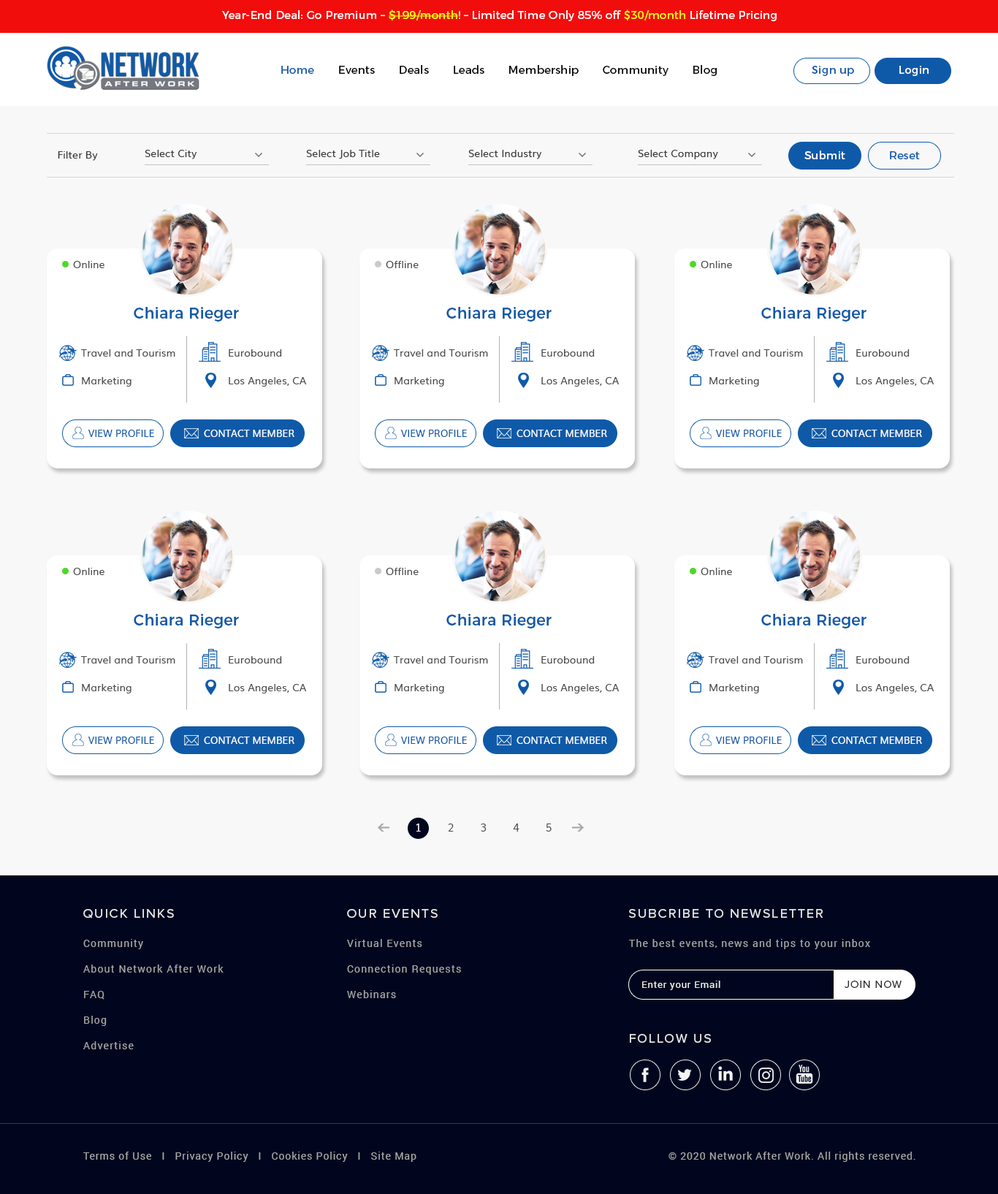
<style>
.page{position:relative;width:998px;height:1194px;background:#ffffff}
.page>*{position:absolute;margin:0}
.t1{font:11px "Montserrat-Regular";letter-spacing:0.01em;color:#fffefe}
.t2{font:11px "Montserrat-Regular";letter-spacing:0.01em;color:#eafd18}
.t3{font:11px "Montserrat-Regular";letter-spacing:0.01em;color:#000000}
.t4{font:11px "Montserrat-Regular";letter-spacing:0.01em;color:#0f5aa8}
.t5{font:11px "Montserrat-Regular";letter-spacing:0.01em;color:#ffffff}
.t6{font:10.2px "Muli";letter-spacing:0.005em;color:#393939}
.t7{font:10.2px "Muli";letter-spacing:0.005em;color:#4e4e4e}
.t8{font:15.3px "Montserrat-Medium";letter-spacing:0.01em;color:#0f5aa8}
.t9{font:10.2px/27.8px "Muli";letter-spacing:0.005em;color:#4e4e4e}
.t10{font:9.5px "Muli";letter-spacing:0.01em;color:#0f5aa8}
.t11{font:9.5px "Muli";letter-spacing:0.01em;color:#ffffff}
.t12{font:11px "Muli";letter-spacing:0.005em;color:#4e4e4e}
.t13{font:11px "Muli";letter-spacing:0.005em;color:#ffffff}
.t14{font:13.2px "ProximaNova-Regular";letter-spacing:0.105em;color:#e7e7e7;text-transform:uppercase}
.t15{font:10.2px/25.6px "Roboto-Regular";letter-spacing:0.085em;color:#a7a7a7}
.t16{font:10.2px "Roboto-Regular";letter-spacing:0.085em;color:#a7a7a7}
.t17{font:9.5px "Roboto-Regular";letter-spacing:0.065em;color:#e7e7e7}
.t18{font:11px "ProximaNova-Regular";letter-spacing:0.065em;color:#262626;text-transform:uppercase}
.t19{font:10.2px "Roboto-Regular";letter-spacing:0.065em;color:#a7a7a7}
</style>
<div class="page">
<p class="t1" style="left:222px;top:10px;width:555px;height:11px">Year-End Deal: Go Premium – <span class="t2">$199/month</span>! – Limited Time Only 85% off <span class="t2">$30/month</span> Lifetime Pricing</p>
<p class="t3" style="left:281px;top:65px;width:436px;height:11px"><span class="t4">Home</span>       Events       Deals       Leads       Membership       Community       Blog</p>
<p class="t4" style="left:812px;top:66px;width:42px;height:10px">Sign up</p>
<p class="t5" style="left:900px;top:66px;width:29px;height:10px">Login</p>
<p class="t6" style="left:145px;top:150px;width:52px;height:9px">Select City</p>
<p class="t6" style="left:306px;top:150px;width:74px;height:9px">Select Job Title</p>
<p class="t6" style="left:469px;top:150px;width:73px;height:9px">Select Industry</p>
<p class="t6" style="left:638px;top:150px;width:80px;height:9px">Select Company</p>
<p class="t6" style="left:58px;top:151px;width:40px;height:10px">Filter By</p>
<p class="t5" style="left:805px;top:151px;width:41px;height:8px">Submit</p>
<p class="t4" style="left:890px;top:151px;width:30px;height:8px">Reset</p>
<p class="t7" style="left:73px;top:261px;width:32px;height:7px">Online</p>
<p class="t7" style="left:386px;top:261px;width:33px;height:7px">Offline</p>
<p class="t7" style="left:701px;top:261px;width:31px;height:7px">Online</p>
<p class="t8" style="left:134px;top:307px;width:105px;height:15px">Chiara Rieger</p>
<p class="t8" style="left:447px;top:307px;width:105px;height:15px">Chiara Rieger</p>
<p class="t8" style="left:762px;top:307px;width:105px;height:15px">Chiara Rieger</p>
<p class="t9" style="left:80px;top:349px;width:95px;height:38px">Travel and Tourism<br>Marketing</p>
<p class="t9" style="left:229px;top:349px;width:78px;height:38px">Eurobound<br>Los Angeles, CA</p>
<p class="t9" style="left:393px;top:349px;width:95px;height:38px">Travel and Tourism<br>Marketing</p>
<p class="t9" style="left:542px;top:349px;width:78px;height:38px">Eurobound<br>Los Angeles, CA</p>
<p class="t9" style="left:708px;top:349px;width:95px;height:38px">Travel and Tourism<br>Marketing</p>
<p class="t9" style="left:857px;top:349px;width:78px;height:38px">Eurobound<br>Los Angeles, CA</p>
<p class="t10" style="left:88px;top:430px;width:66px;height:7px">VIEW PROFILE</p>
<p class="t11" style="left:204px;top:430px;width:91px;height:7px">CONTACT MEMBER</p>
<p class="t10" style="left:401px;top:430px;width:66px;height:7px">VIEW PROFILE</p>
<p class="t11" style="left:517px;top:430px;width:90px;height:7px">CONTACT MEMBER</p>
<p class="t10" style="left:716px;top:430px;width:66px;height:7px">VIEW PROFILE</p>
<p class="t11" style="left:832px;top:430px;width:90px;height:7px">CONTACT MEMBER</p>
<p class="t7" style="left:73px;top:568px;width:32px;height:7px">Online</p>
<p class="t7" style="left:386px;top:568px;width:33px;height:7px">Offline</p>
<p class="t7" style="left:701px;top:568px;width:31px;height:7px">Online</p>
<p class="t8" style="left:134px;top:614px;width:105px;height:15px">Chiara Rieger</p>
<p class="t8" style="left:447px;top:614px;width:105px;height:15px">Chiara Rieger</p>
<p class="t8" style="left:762px;top:614px;width:105px;height:15px">Chiara Rieger</p>
<p class="t9" style="left:80px;top:656px;width:95px;height:38px">Travel and Tourism<br>Marketing</p>
<p class="t9" style="left:229px;top:656px;width:78px;height:38px">Eurobound<br>Los Angeles, CA</p>
<p class="t9" style="left:393px;top:656px;width:95px;height:38px">Travel and Tourism<br>Marketing</p>
<p class="t9" style="left:542px;top:656px;width:78px;height:38px">Eurobound<br>Los Angeles, CA</p>
<p class="t9" style="left:708px;top:656px;width:95px;height:38px">Travel and Tourism<br>Marketing</p>
<p class="t9" style="left:857px;top:656px;width:78px;height:38px">Eurobound<br>Los Angeles, CA</p>
<p class="t10" style="left:88px;top:737px;width:66px;height:7px">VIEW PROFILE</p>
<p class="t11" style="left:204px;top:737px;width:91px;height:7px">CONTACT MEMBER</p>
<p class="t10" style="left:401px;top:737px;width:66px;height:7px">VIEW PROFILE</p>
<p class="t11" style="left:517px;top:737px;width:90px;height:7px">CONTACT MEMBER</p>
<p class="t10" style="left:716px;top:737px;width:66px;height:7px">VIEW PROFILE</p>
<p class="t11" style="left:832px;top:737px;width:90px;height:7px">CONTACT MEMBER</p>
<p class="t12" style="left:416px;top:824px;width:136px;height:8px"><span class="t13">1</span>        2        3        4        5</p>
<p class="t14" style="left:83px;top:909px;width:91px;height:10px">Quick Links</p>
<p class="t14" style="left:347px;top:909px;width:91px;height:9px">Our Events</p>
<p class="t14" style="left:629px;top:909px;width:194px;height:9px">SUBCRIBE TO NEWSLETTER</p>
<p class="t15" style="left:83px;top:939px;width:141px;height:111px">Community<br>About Network After Work<br>FAQ<br>Blog<br>Advertise</p>
<p class="t15" style="left:347px;top:939px;width:114px;height:59px">Virtual Events<br>Connection Requests<br>Webinars</p>
<p class="t16" style="left:629px;top:939px;width:242px;height:10px">The best events, news and tips to your inbox</p>
<p class="t17" style="left:642px;top:981px;width:79px;height:9px">Enter your Email</p>
<p class="t18" style="left:845px;top:981px;width:57px;height:7px">JOIN NOW</p>
<p class="t14" style="left:630px;top:1034px;width:81px;height:9px">FOLLOW US</p>
<p class="t19" style="left:83px;top:1152px;width:334px;height:10px">Terms of Use   I   Privacy Policy   I   Cookies Policy   I   Site Map</p>
<p class="t19" style="left:669px;top:1152px;width:247px;height:10px">© 2020 Network After Work. All rights reserved.</p>
</div>
